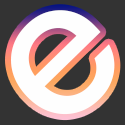
<style>
.page{position:relative;width:125px;height:125px;background:#333333}
.page>*{position:absolute;margin:0}
.t1{font:200px "DMSans24pt-Medium";letter-spacing:-0.03em;color:#fefefe}
</style>
<div class="page">
<p class="t1" style="left:11px;top:10px;width:104px;height:105px;rotate:-44deg">e</p>
</div>
